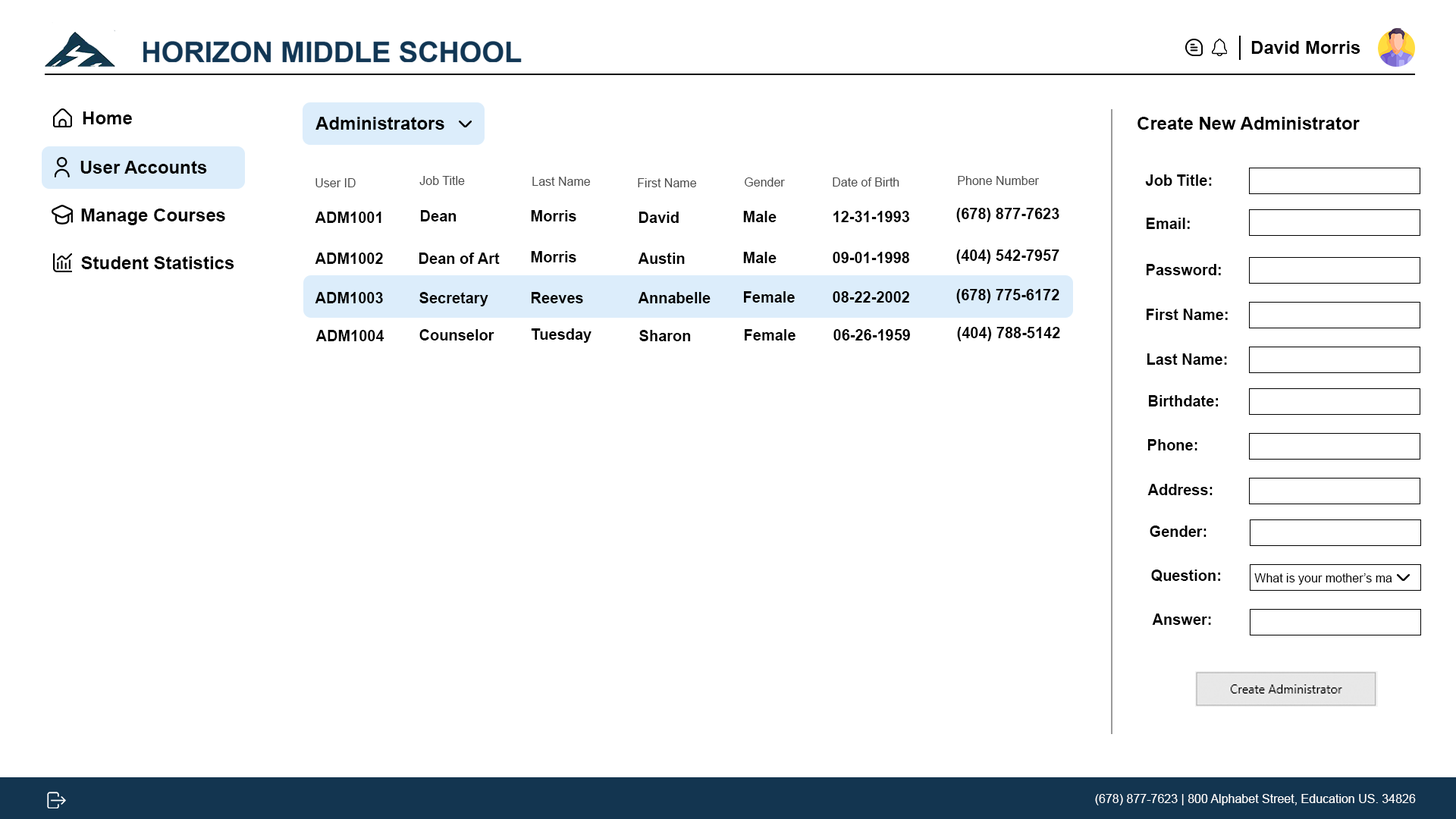
<style>
.page{position:relative;width:1456px;height:819px;background:#ffffff}
.page>*{position:absolute;margin:0}
.t1{font:18.2px "Arial-BoldMT";color:#000000}
.t2{font:18.2px "Arial-BoldMT";color:#010000}
.t3{font:12.1px "ArialMT";color:#4b4b4b}
.t4{font:15.2px "Arial-BoldMT";color:#000000}
.t5{font:12.1px "ArialMT";color:#000000}
.t6{font:12.1px "ArialMT";color:#ffffff}
</style>
<div class="page">
<p class="t1" style="left:1251px;top:41px;width:109px;height:13px">David Morris</p>
<p class="t1" style="left:83px;top:111px;width:49px;height:13px">Home</p>
<p class="t1" style="left:315px;top:117px;width:129px;height:13px">Administrators</p>
<p class="t1" style="left:1137px;top:117px;width:223px;height:13px">Create New Administrator</p>
<p class="t2" style="left:80px;top:161px;width:127px;height:13px">User Accounts</p>
<p class="t3" style="left:315px;top:178px;width:41px;height:9px">User ID</p>
<p class="t3" style="left:419px;top:176px;width:46px;height:9px">Job Title</p>
<p class="t3" style="left:532px;top:177px;width:59px;height:9px">Last Name</p>
<p class="t3" style="left:638px;top:178px;width:59px;height:9px">First Name</p>
<p class="t3" style="left:745px;top:177px;width:40px;height:10px">Gender</p>
<p class="t3" style="left:833px;top:177px;width:66px;height:10px">Date of Birth</p>
<p class="t3" style="left:958px;top:176px;width:81px;height:9px">Phone Number</p>
<p class="t4" style="left:1145px;top:174px;width:67px;height:12px">Job Title:</p>
<p class="t1" style="left:81px;top:209px;width:144px;height:16px">Manage Courses</p>
<p class="t4" style="left:956px;top:208px;width:103px;height:14px">(678) 877-7623</p>
<p class="t4" style="left:315px;top:212px;width:66px;height:11px">ADM1001</p>
<p class="t4" style="left:421px;top:210px;width:36px;height:11px">Dean</p>
<p class="t4" style="left:531px;top:210px;width:45px;height:11px">Morris</p>
<p class="t4" style="left:639px;top:212px;width:40px;height:11px">David</p>
<p class="t4" style="left:743px;top:211px;width:34px;height:11px">Male</p>
<p class="t4" style="left:833px;top:211px;width:76px;height:11px">12-31-1993</p>
<p class="t4" style="left:1147px;top:218px;width:43px;height:11px">Email:</p>
<p class="t1" style="left:81px;top:256px;width:153px;height:13px">Student Statistics</p>
<p class="t4" style="left:315px;top:253px;width:68px;height:11px">ADM1002</p>
<p class="t4" style="left:419px;top:253px;width:81px;height:11px">Dean of Art</p>
<p class="t4" style="left:531px;top:251px;width:45px;height:11px">Morris</p>
<p class="t4" style="left:638px;top:253px;width:47px;height:11px">Austin</p>
<p class="t4" style="left:743px;top:252px;width:34px;height:11px">Male</p>
<p class="t4" style="left:833px;top:252px;width:76px;height:11px">09-01-1998</p>
<p class="t4" style="left:956px;top:249px;width:103px;height:15px">(404) 542-7957</p>
<p class="t4" style="left:1147px;top:264px;width:74px;height:11px">Password:</p>
<p class="t4" style="left:315px;top:292px;width:68px;height:11px">ADM1003</p>
<p class="t4" style="left:419px;top:292px;width:69px;height:14px">Secretary</p>
<p class="t4" style="left:532px;top:292px;width:51px;height:11px">Reeves</p>
<p class="t4" style="left:638px;top:292px;width:73px;height:11px">Annabelle</p>
<p class="t4" style="left:744px;top:291px;width:51px;height:12px">Female</p>
<p class="t4" style="left:833px;top:291px;width:76px;height:12px">08-22-2002</p>
<p class="t4" style="left:956px;top:289px;width:103px;height:14px">(678) 775-6172</p>
<p class="t4" style="left:1147px;top:309px;width:81px;height:11px">First Name:</p>
<p class="t4" style="left:315px;top:330px;width:69px;height:11px">ADM1004</p>
<p class="t4" style="left:419px;top:329px;width:75px;height:11px">Counselor</p>
<p class="t4" style="left:531px;top:328px;width:60px;height:15px">Tuesday</p>
<p class="t4" style="left:639px;top:330px;width:52px;height:11px">Sharon</p>
<p class="t4" style="left:745px;top:329px;width:50px;height:11px">Female</p>
<p class="t4" style="left:833px;top:329px;width:77px;height:11px">06-26-1959</p>
<p class="t4" style="left:957px;top:327px;width:103px;height:14px">(404) 788-5142</p>
<p class="t4" style="left:1147px;top:353px;width:80px;height:12px">Last Name:</p>
<p class="t4" style="left:1149px;top:395px;width:69px;height:11px">Birthdate:</p>
<p class="t4" style="left:1148px;top:439px;width:49px;height:11px">Phone:</p>
<p class="t4" style="left:1147px;top:484px;width:66px;height:11px">Address:</p>
<p class="t4" style="left:1150px;top:526px;width:56px;height:11px">Gender:</p>
<p class="t4" style="left:1151px;top:570px;width:69px;height:12px">Question:</p>
<p class="t5" style="left:1254px;top:573px;width:138px;height:12px">What is your mother’s ma</p>
<p class="t4" style="left:1152px;top:613px;width:59px;height:12px">Answer:</p>
<p class="t6" style="left:1095px;top:794px;width:321px;height:11px">(678) 877-7623 | 800 Alphabet Street, Education US. 34826</p>
</div>
